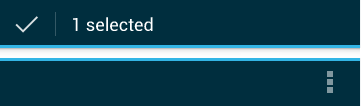
<style>
.page{position:relative;width:361px;height:106px;background:#002e3e}
.page>*{position:absolute;margin:0}
.t1{font:18px "Roboto-Regular";color:#ffffff}
</style>
<div class="page">
<p class="t1" style="left:73px;top:17px;width:80px;height:14px">1 selected</p>
</div>
